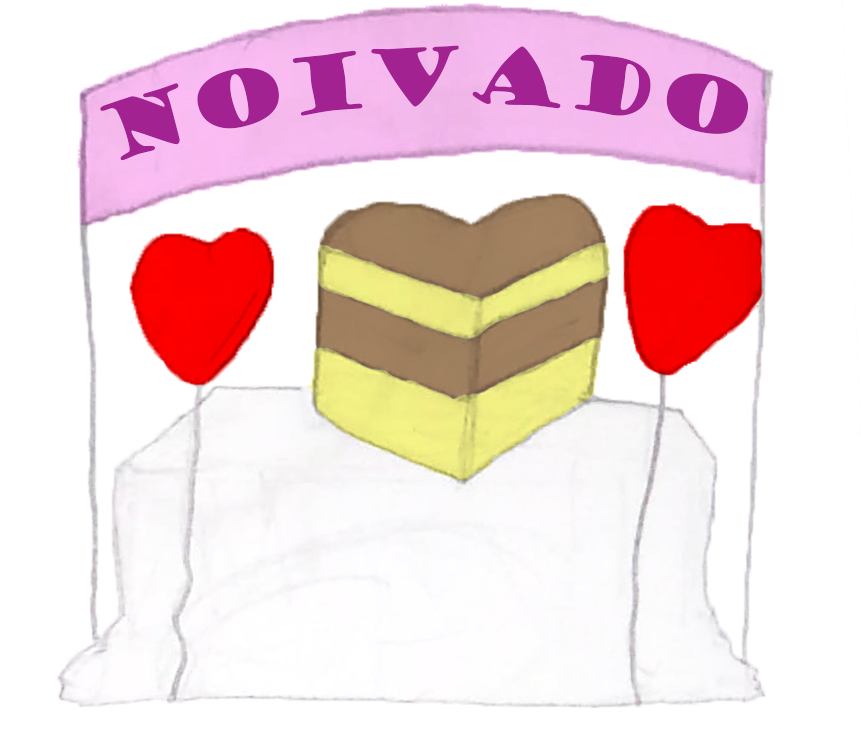
<style>
.page{position:relative;width:861px;height:729px;background:#ffffff}
.page>*{position:absolute;margin:0}
.t1{font:76px "GoudyStout";letter-spacing:-0.02em;color:#902384}
</style>
<div class="page">
<p class="t1" style="left:100px;top:45px;width:649px;height:116px;rotate:-2deg">NOIVADO</p>
</div>
